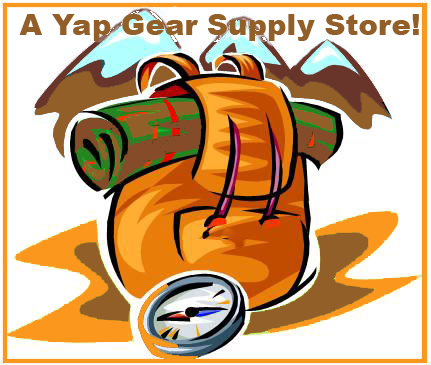
<style>
.page{position:relative;width:431px;height:365px;background:#ffffff}
.page>*{position:absolute;margin:0}
.t1{font:29.2px "Arial-Black";color:#925f29}
</style>
<div class="page">
<p class="t1" style="left:19px;top:14px;width:400px;height:27px">A Yap Gear Supply Store!</p>
</div>
